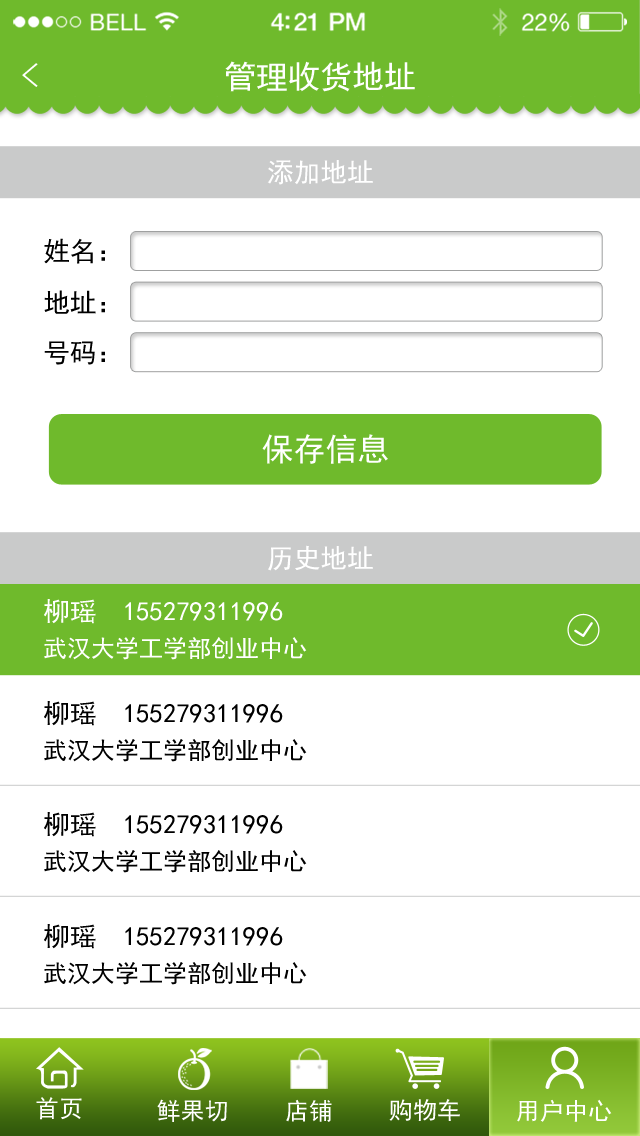
<style>
.page{position:relative;width:640px;height:1136px;background:#ffffff}
.page>*{position:absolute;margin:0}
.t1{font:33.8px "SimHei";color:#ffffff;scale:1.07 1}
.t2{font:32px "SimHei";color:#ffffff}
.t3{font:26.7px "SimHei";color:#ffffff}
.t4{font:26.7px "SimHei";color:#000000}
.t5{font:26.7px/36px "SimHei";color:#ffffff}
.t6{font:24px/36px "SimHei";color:#ffffff}
.t7{font:26.7px/36px "SimHei";color:#000000}
.t8{font:24px/36px "SimHei";color:#000000}
.t9{font:24.1px "SimHei";color:#ffffff}
</style>
<div class="page">
<p class="t1" style="left:22px;top:63px;width:16px;height:24px;rotate:180deg">&gt;</p>
<p class="t2" style="left:225px;top:61px;width:190px;height:31px">管理收货地址</p>
<p class="t3" style="left:267px;top:160px;width:106px;height:25px">添加地址</p>
<p class="t4" style="left:44px;top:238px;width:61px;height:26px">姓名：</p>
<p class="t4" style="left:44px;top:290px;width:61px;height:24px">地址：</p>
<p class="t4" style="left:44px;top:341px;width:61px;height:24px">号码：</p>
<p class="t2" style="left:262px;top:434px;width:126px;height:30px">保存信息</p>
<p class="t3" style="left:268px;top:545px;width:105px;height:26px">历史地址</p>
<p class="t5" style="left:44px;top:599px;width:263px;height:61px">柳瑶  155279311996<br><span class="t6">武汉大学工学部创业中心</span></p>
<p class="t7" style="left:44px;top:701px;width:263px;height:61px">柳瑶  155279311996<br><span class="t8">武汉大学工学部创业中心</span></p>
<p class="t7" style="left:44px;top:812px;width:263px;height:61px">柳瑶  155279311996<br><span class="t8">武汉大学工学部创业中心</span></p>
<p class="t7" style="left:44px;top:924px;width:263px;height:61px">柳瑶  155279311996<br><span class="t8">武汉大学工学部创业中心</span></p>
<p class="t9" style="left:36px;top:1097px;width:46px;height:23px">首页</p>
<p class="t9" style="left:157px;top:1099px;width:70px;height:23px">鲜果切</p>
<p class="t9" style="left:286px;top:1099px;width:46px;height:23px">店铺</p>
<p class="t9" style="left:389px;top:1099px;width:71px;height:22px">购物车</p>
<p class="t9" style="left:517px;top:1099px;width:95px;height:23px">用户中心</p>
</div>
